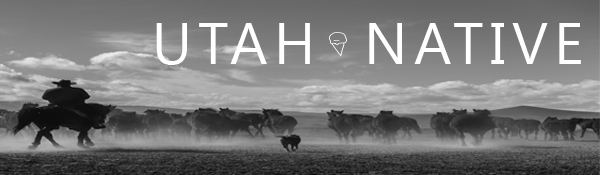
<style>
.page{position:relative;width:600px;height:175px}
.page>*{position:absolute;margin:0}
.t1{font:58.3px "Gadugi";letter-spacing:0.1em;color:#ffffff}
</style>
<div class="page">
<p class="t1" style="left:156px;top:23px;width:425px;height:42px">UTAH  NATIVE</p>
</div>
